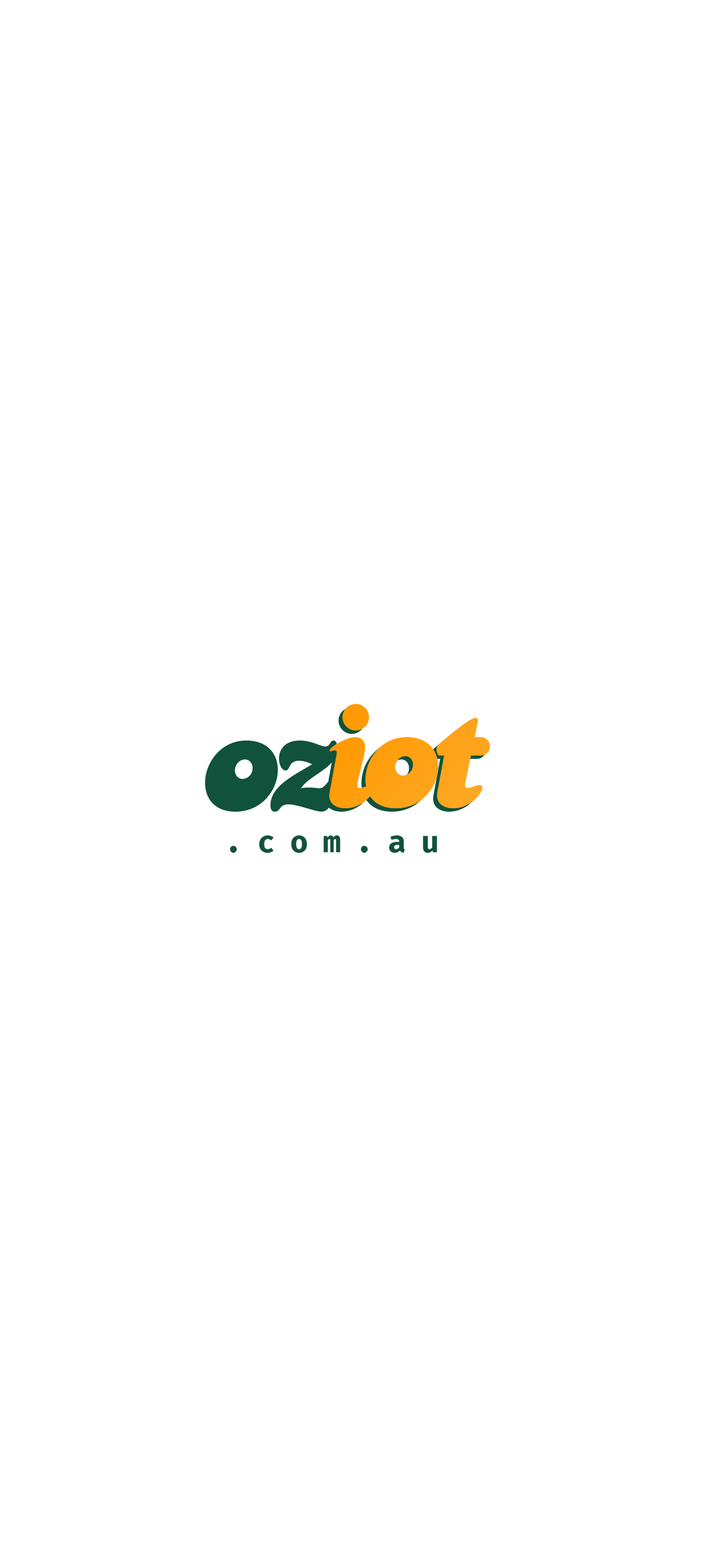
<style>
.page{position:relative;width:725px;height:1568px;background:#ffffff}
.page>*{position:absolute;margin:0}
.t1{font:187px "Gvtime-Regular"}
.t2{font:187px "Gvtime-Regular";color:#ff9f0d}
</style>
<div class="page">
<p class="t1" style="left:205px;top:707px;width:281px;height:105px">oziot</p>
<p class="t2" style="left:329px;top:704px;width:161px;height:104px">iot</p>
</div>
